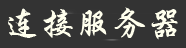
<style>
.page{position:relative;width:186px;height:48px;background:#333333}
.page>*{position:absolute;margin:0}
.t1{font:36px "STXingkai";color:#ffffed}
</style>
<div class="page">
<p class="t1" style="left:8px;top:7px;width:170px;height:33px">连接服务器</p>
</div>
